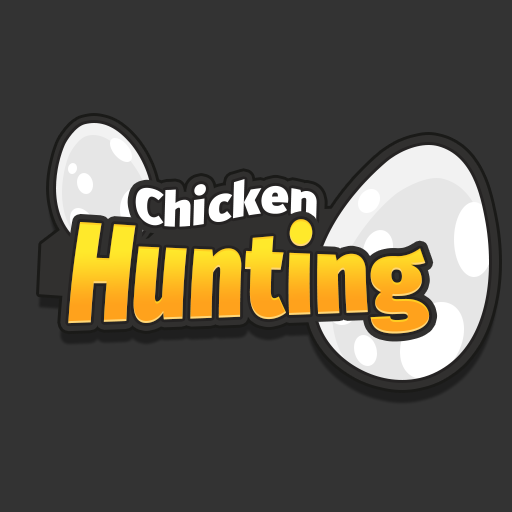
<style>
.page{position:relative;width:512px;height:512px;background:#333333}
.page>*{position:absolute;margin:0}
.t1{font:48.6px "FiraSans-Ultra";letter-spacing:0.025em;color:#ffffff}
.t2{font:77.8px "FiraSans-Ultra";letter-spacing:0.01em;scale:1.25 1}
</style>
<div class="page">
<p class="t1" style="left:135px;top:179px;width:182px;height:48px;rotate:2deg">Сhicken</p>
<p class="t2" style="left:68px;top:219px;width:362px;height:115px">Hunting</p>
</div>
